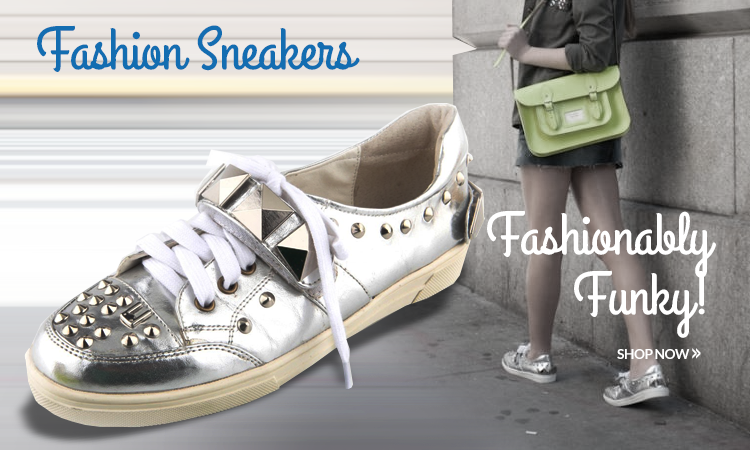
<style>
.page{position:relative;width:750px;height:450px}
.page>*{position:absolute;margin:0}
.t1{font:60px "GrandHotel-Regular";letter-spacing:-0.008em;color:#136db1}
.t2{font:60px/60px "GrandHotel-Regular";letter-spacing:-0.008em;color:#ffffff}
.t3{font:13.8px "Lato-Bold";letter-spacing:-0.04em;color:#ffffff;text-transform:uppercase}
.t4{font:22.5px "Lato-Bold";letter-spacing:-0.26em;color:#ffffff;text-transform:uppercase;scale:0.51 1}
</style>
<div class="page">
<p class="t1" style="left:37px;top:25px;width:323px;height:47px">Fashion Sneakers</p>
<p class="t2" style="left:487px;top:210px;width:229px;height:128px;text-align:right">Fashionably<br>Funky!</p>
<p class="t3" style="left:617px;top:348px;width:84px;height:11px">shop now <span class="t4">&gt;&gt;</span></p>
</div>
